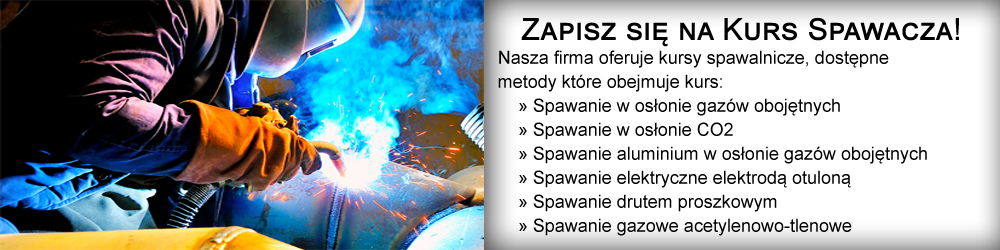
<style>
.page{position:relative;width:1000px;height:250px;background:#ffffff}
.page>*{position:absolute;margin:0}
.t1{font:18px/24px "ArialMT";color:#000000}
.t2{font:30px/24px "ArialMT";color:#000000;font-variant:small-caps;font-weight:bold}
</style>
<div class="page">
<p class="t1" style="left:498px;top:17px;width:461px;height:219px;text-align:center"><span class="t2">Zapisz się na Kurs Spawacza!<br></span>Nasza firma oferuje kursy spawalnicze, dostępne        metody które obejmuje kurs:<br>    » Spawanie w osłonie gazów obojętnych<br>    » Spawanie w osłonie CO2<br>    » Spawanie aluminium w osłonie gazów obojętnych<br>    » Spawanie elektryczne elektrodą otuloną<br>    » Spawanie drutem proszkowym<br>    » Spawanie gazowe acetylenowo-tlenowe</p>
</div>
